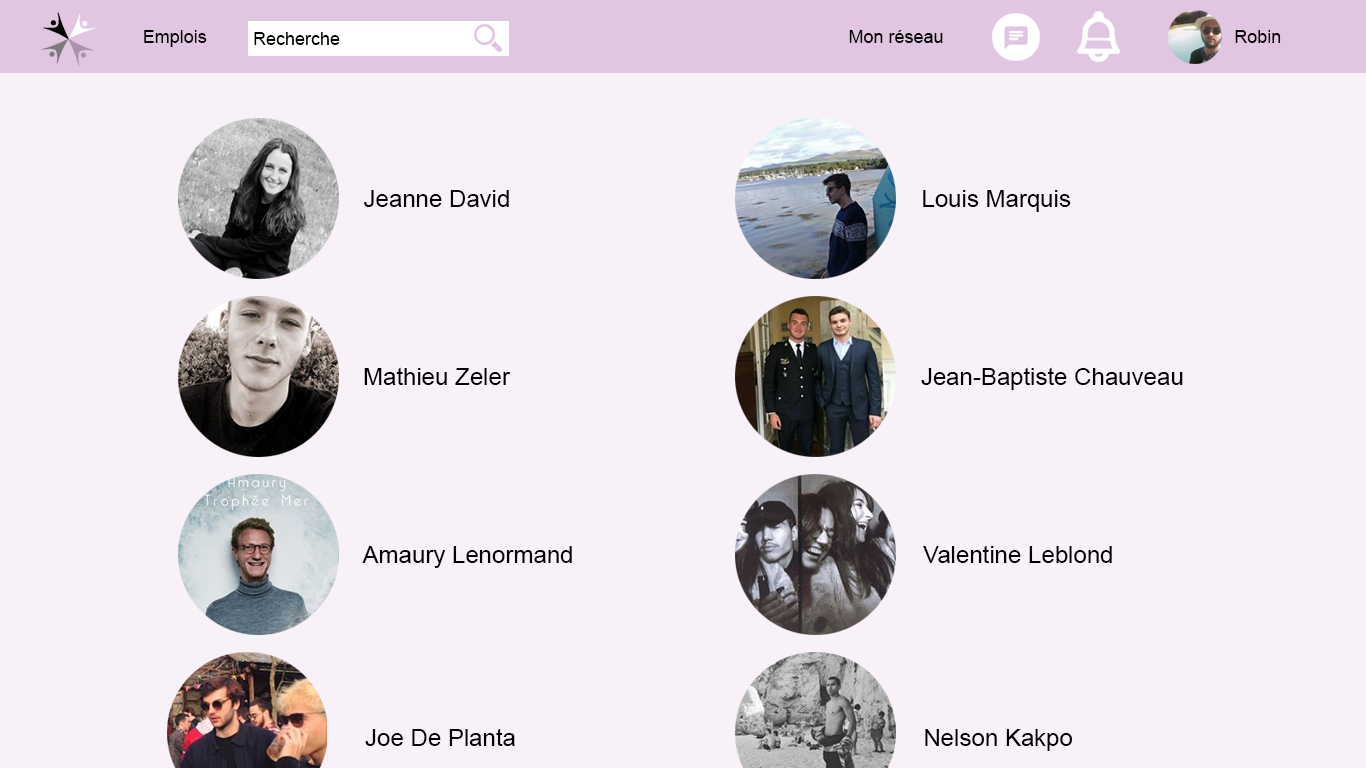
<style>
.page{position:relative;width:1366px;height:768px;background:#f8f2f8}
.page>*{position:absolute;margin:0}
.t1{font:18px "ArialMT";color:#000000}
.t2{font:24px "ArialMT";color:#010101}
.t3{font:24px "ArialMT";color:#000000}
</style>
<div class="page">
<p class="t1" style="left:144px;top:30px;width:63px;height:17px">Emplois</p>
<p class="t1" style="left:849px;top:30px;width:94px;height:13px">Mon réseau</p>
<p class="t1" style="left:1235px;top:30px;width:46px;height:13px">Robin</p>
<p class="t1" style="left:254px;top:32px;width:86px;height:13px">Recherche</p>
<p class="t2" style="left:364px;top:190px;width:145px;height:17px">Jeanne David</p>
<p class="t3" style="left:923px;top:190px;width:148px;height:22px">Louis Marquis</p>
<p class="t3" style="left:364px;top:367px;width:147px;height:18px">Mathieu Zeler</p>
<p class="t3" style="left:921px;top:367px;width:262px;height:23px">Jean-Baptiste Chauveau</p>
<p class="t3" style="left:923px;top:545px;width:189px;height:18px">Valentine Leblond</p>
<p class="t3" style="left:362px;top:546px;width:210px;height:22px">Amaury Lenormand</p>
<p class="t3" style="left:365px;top:728px;width:150px;height:18px">Joe De Planta</p>
<p class="t3" style="left:925px;top:729px;width:148px;height:22px">Nelson Kakpo</p>
</div>
